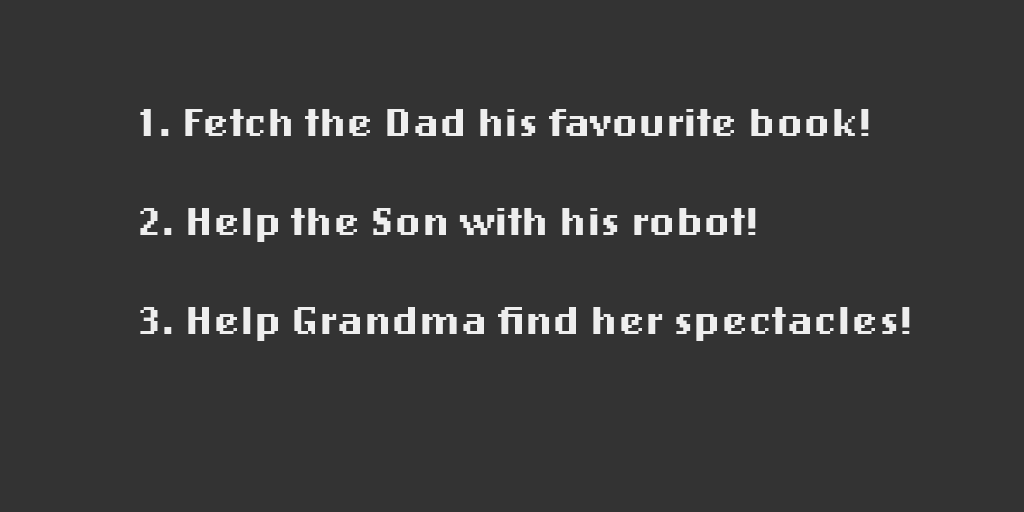
<style>
.page{position:relative;width:1024px;height:512px;background:#333333}
.page>*{position:absolute;margin:0}
.t1{font:41.2px "LoRes12OT-Bold";color:#eeeeee}
</style>
<div class="page">
<p class="t1" style="left:140px;top:109px;width:770px;height:232px">1. Fetch the Dad his favourite book!<br><br>2. Help the Son with his robot!<br><br>3. Help Grandma find her spectacles!</p>
</div>
